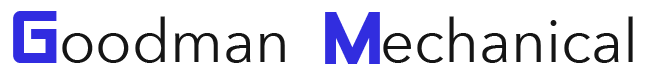
<style>
.page{position:relative;width:650px;height:76px;background:#ffffff}
.page>*{position:absolute;margin:0}
.t1{font:72px "AlienEncountersSolid";color:#312de0}
.t2{font:60px "AvenirNext-Regular";color:#151515}
</style>
<div class="page">
<p class="t1" style="left:13px;top:11px;width:44px;height:52px">G</p>
<p class="t2" style="left:62px;top:16px;width:571px;height:47px">oodman      echanical</p>
<p class="t1" style="left:325px;top:12px;width:55px;height:52px">M</p>
</div>
